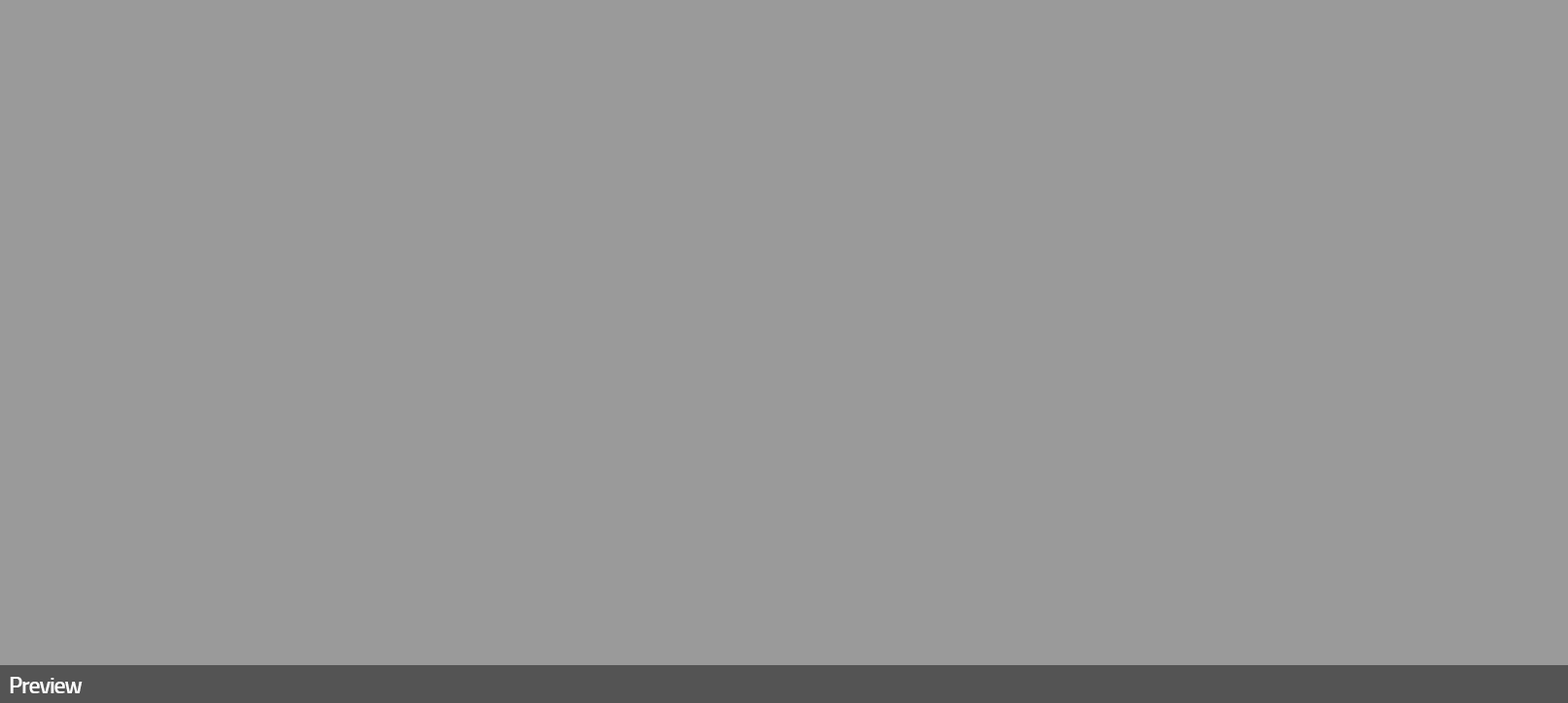
<style>
.page{position:relative;width:1568px;height:703px;background:#9a9a9a}
.page>*{position:absolute;margin:0}
.t1{font:23.3px "Titillium-Semibold";letter-spacing:-0.05em;color:#ffffff}
</style>
<div class="page">
<p class="t1" style="left:10px;top:677px;width:73px;height:17px">Preview</p>
</div>
